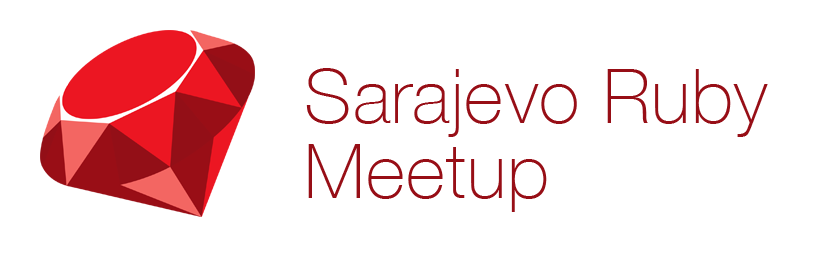
<style>
.page{position:relative;width:816px;height:276px;background:#ffffff}
.page>*{position:absolute;margin:0}
.t1{font:75px/75px "HelveticaNeue-Thin";letter-spacing:0.016em;color:#970e16}
</style>
<div class="page">
<p class="t1" style="left:306px;top:68px;width:462px;height:144px">Sarajevo Ruby <br>Meetup</p>
</div>
